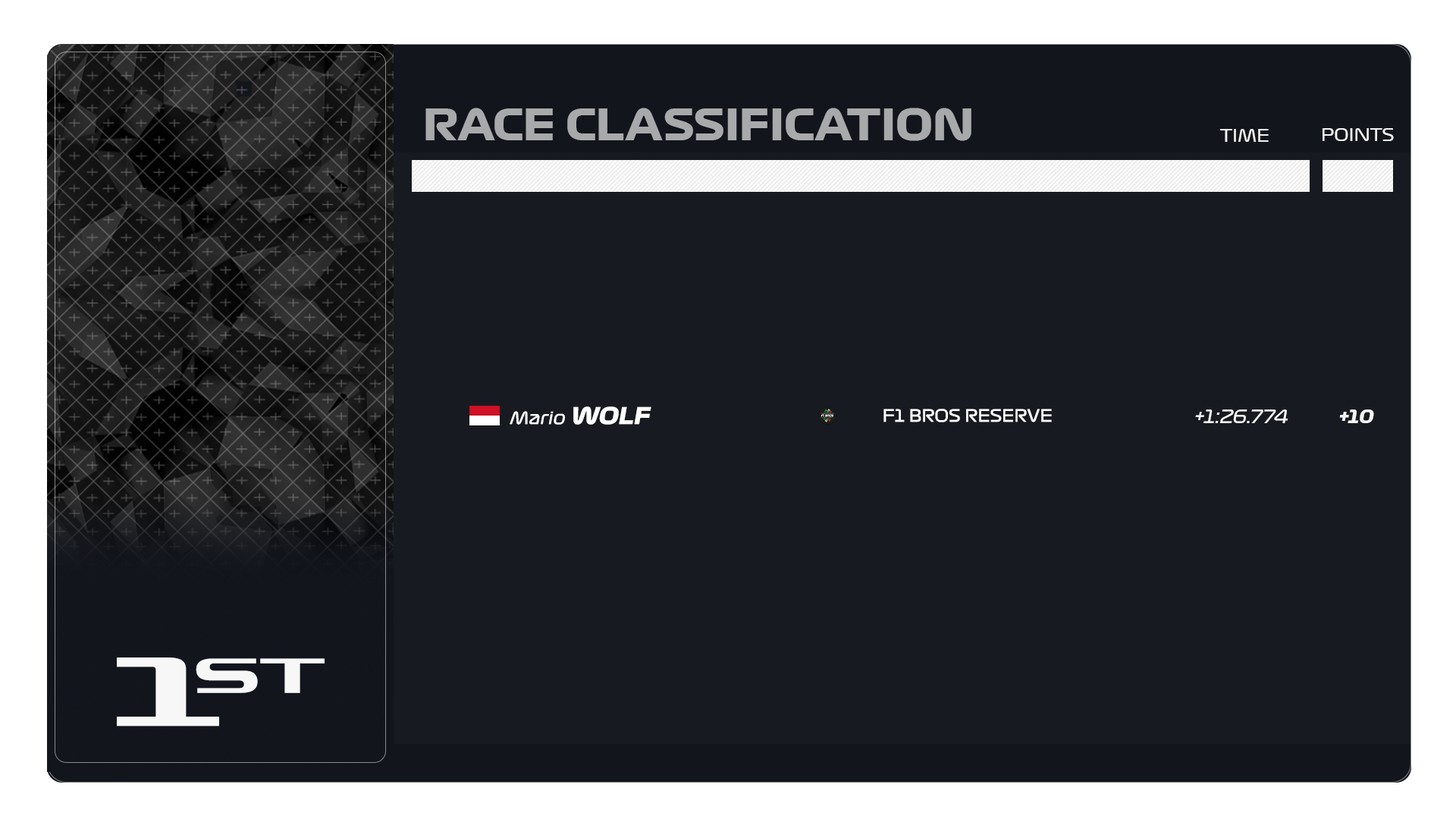
<style>
.page{position:relative;width:1456px;height:819px;background:#181a21}
.page>*{position:absolute;margin:0}
.t1{font:42.5px "Formula1-Display-Bold";color:#a7a9ab}
.t2{font:16.9px "Formula1-Display-Regular";color:#f3f3f1}
.t3{font:16.7px "Formula1-Display-Regular";color:#ffffff;font-style:italic}
.t4{font:22.7px "Formula1-Display-Bold";color:#ffffff;font-style:italic}
.t5{font:16.7px "Formula1-Display-Regular";color:#ffffff}
.t6{font:18.2px "Formula1-Display-Regular";color:#f7f7f7;font-style:italic}
.t7{font:18.1px "Formula1-Display-Bold";color:#f3f3f1;text-transform:uppercase;font-style:italic}
</style>
<div class="page">
<p class="t1" style="left:425px;top:108px;width:546px;height:33px">RACE CLASSIFICATION</p>
<p class="t2" style="left:1220px;top:129px;width:49px;height:13px">TIME</p>
<p class="t2" style="left:1323px;top:128px;width:71px;height:13px">POINTS</p>
<p class="t3" style="left:510px;top:406px;width:141px;height:19px">Mario<span class="t4"> WOLF</span></p>
<p class="t5" style="left:883px;top:409px;width:169px;height:13px">F1 BROS RESERVE</p>
<p class="t6" style="left:1195px;top:409px;width:93px;height:14px">+1:26.774</p>
<p class="t7" style="left:1339px;top:409px;width:35px;height:14px">+10</p>
</div>
